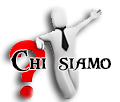
<style>
.page{position:relative;width:120px;height:102px;background:#ffffff}
.page>*{position:absolute;margin:0}
.t1{font:30px "PiecesofEight";color:#000000}
</style>
<div class="page">
<p class="t1" style="left:11px;top:50px;width:100px;height:22px">Chi siamo</p>
</div>
